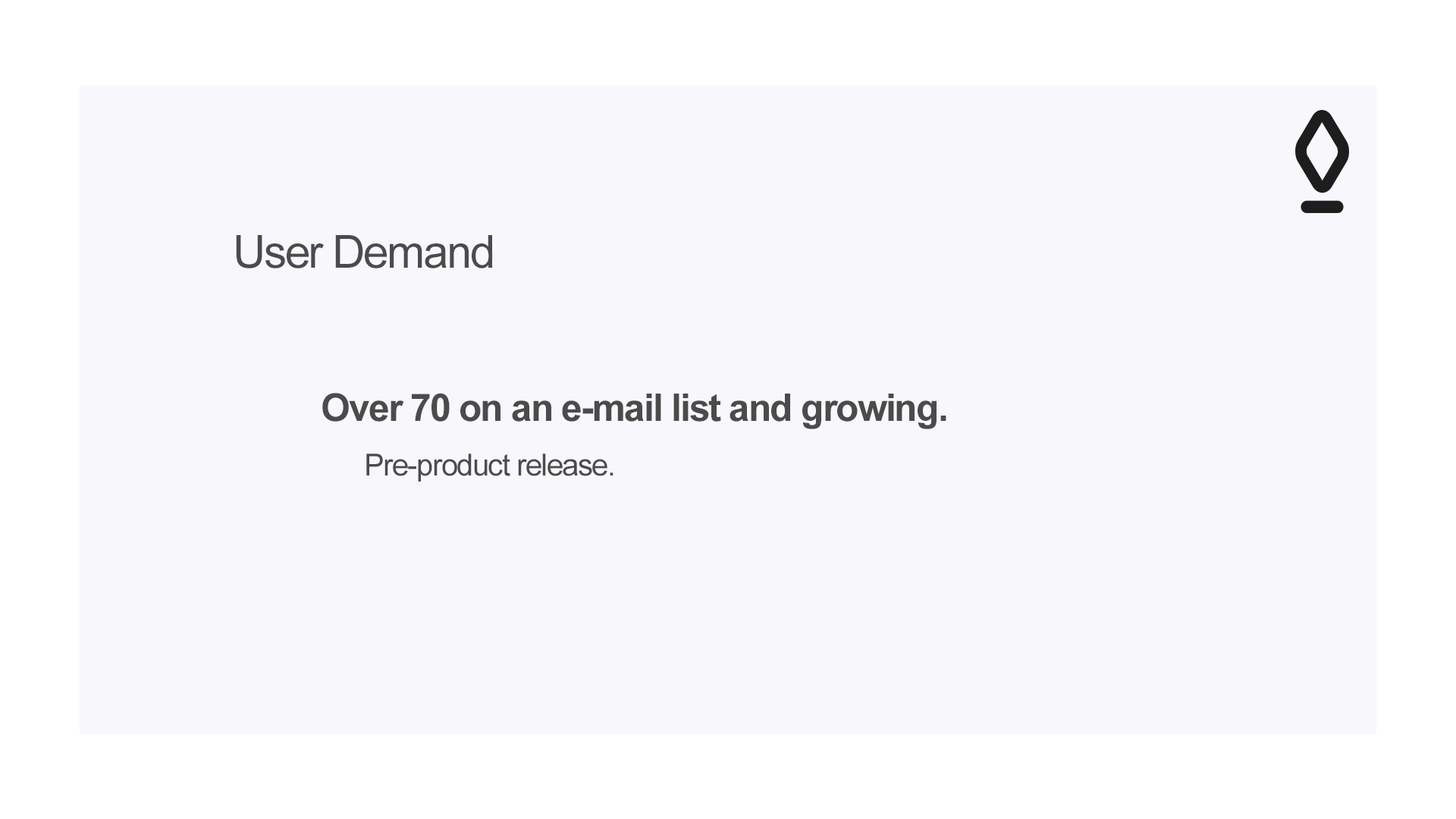
<style>
.page{position:relative;width:1456px;height:819px;background:#f8f8fc}
.page>*{position:absolute;margin:0}
.t1{font:45.5px "ArialMT";letter-spacing:-0.04em;color:#4b4b4b}
.t2{font:38.1px "Arial-BoldMT";letter-spacing:-0.04em;color:#4b4b4b}
.t3{font:30.3px "ArialMT";letter-spacing:-0.04em;color:#4b4b4b}
</style>
<div class="page">
<p class="t1" style="left:236px;top:235px;width:256px;height:33px">User Demand</p>
<p class="t2" style="left:322px;top:393px;width:624px;height:36px">Over 70 on an e-mail list and growing.</p>
<p class="t3" style="left:366px;top:453px;width:247px;height:29px">Pre-product release.</p>
</div>
